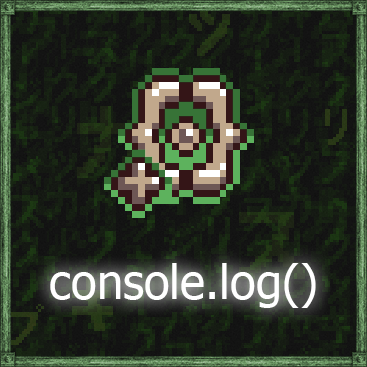
<style>
.page{position:relative;width:367px;height:367px}
.page>*{position:absolute;margin:0}
.t1{font:47.1px "Tahoma";color:#ffffff}
</style>
<div class="page">
<p class="t1" style="left:50px;top:263px;width:266px;height:45px">console.log()</p>
</div>
